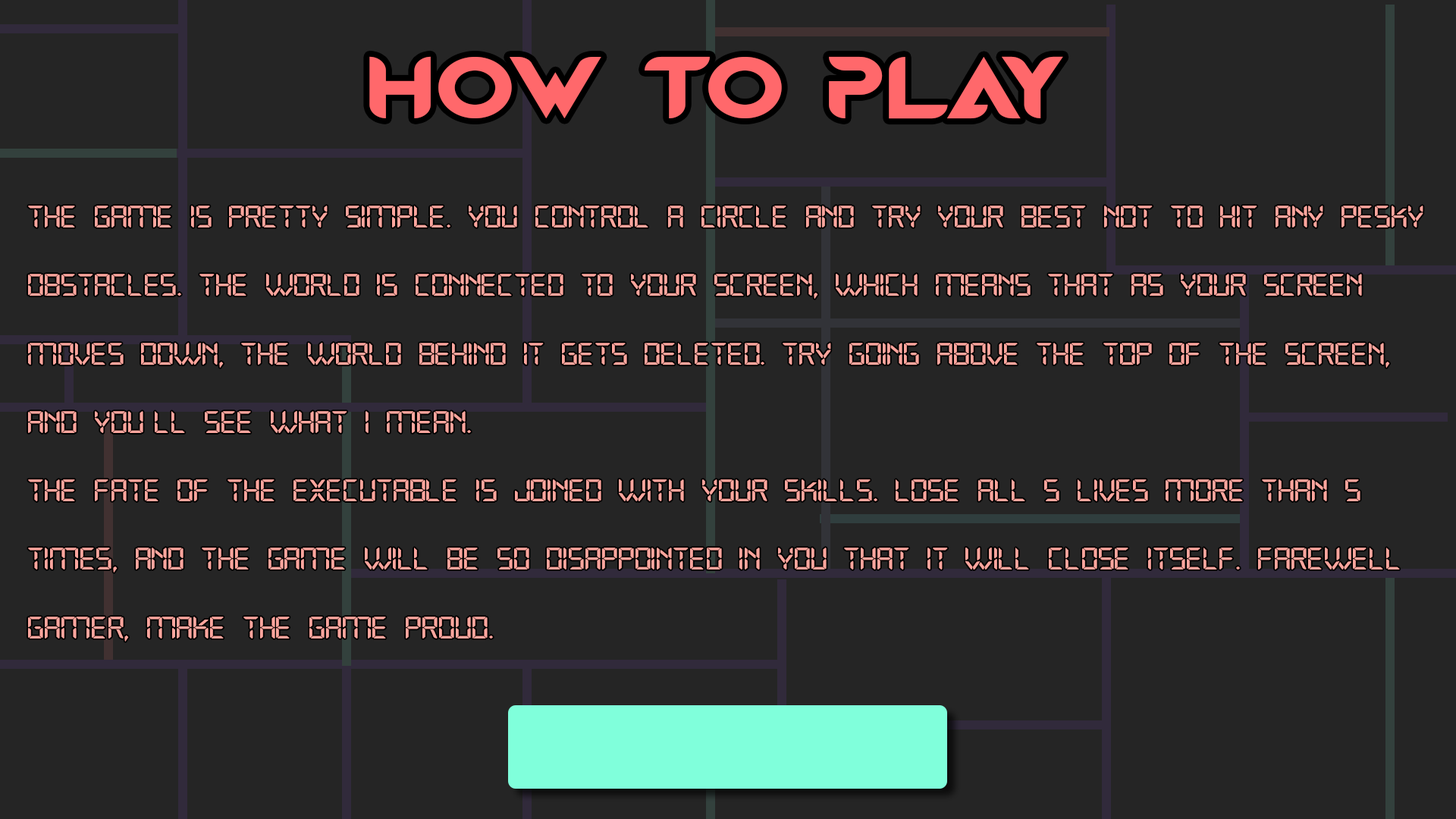
<style>
.page{position:relative;width:1456px;height:819px;background:#252525}
.page>*{position:absolute;margin:0}
.t1{font:84.9px "MagmawaveCaps-Bold";color:#ff686b;scale:1.2 1}
.t2{font:31.4px/68.5px "Open24DisplaySt";color:#ffa69e;scale:1.2 1}
</style>
<div class="page">
<p class="t1" style="left:369px;top:56px;width:694px;height:63px">HOW TO PLAY</p>
<p class="t2" style="left:28px;top:206px;width:1395px;height:436px">The game is pretty simple. You control a circle and try your best not to hit any pesky<br>obstacles. The world is connected to your screen, which means that as your screen<br>moves down, the world behind it gets deleted. Try going above the top of the screen,<br>and you’ll see what I mean.<br>The fate of the executable is joined with your skills. Lose all 5 lives more than 5<br>times, and the game will be so disappointed in you that it will close itself. Farewell<br>Gamer, Make the game proud.</p>
</div>
